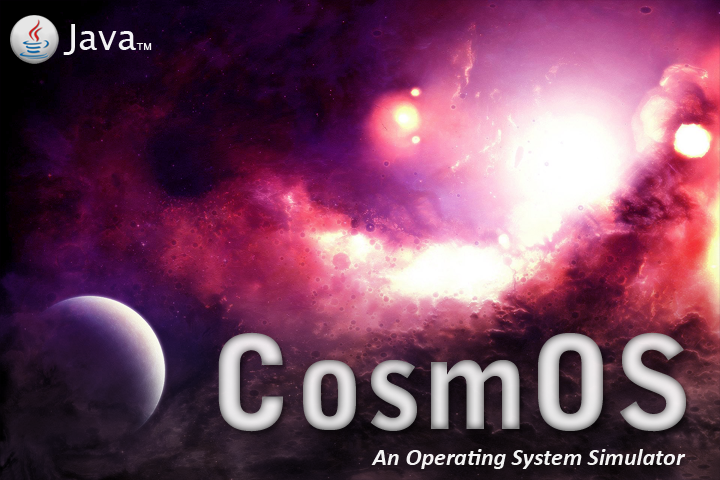
<style>
.page{position:relative;width:720px;height:480px}
.page>*{position:absolute;margin:0}
.t1{font:36px "LucidaSansUnicode";color:#ffffff}
.t2{font:10px "LucidaSansUnicode";color:#ffffff}
.t3{font:128px "BellGothicStd-Black"}
.t4{font:24px "Calibri-BoldItalic";color:#ffffff}
</style>
<div class="page">
<p class="t1" style="left:63px;top:24px;width:89px;height:31px;opacity:0.95">Java<span class="t2">TM</span></p>
<p class="t3" style="left:218px;top:332px;width:468px;height:100px">CosmOS</p>
<p class="t4" style="left:371px;top:449px;width:315px;height:20px;opacity:0.95">An Operating System Simulator</p>
</div>
